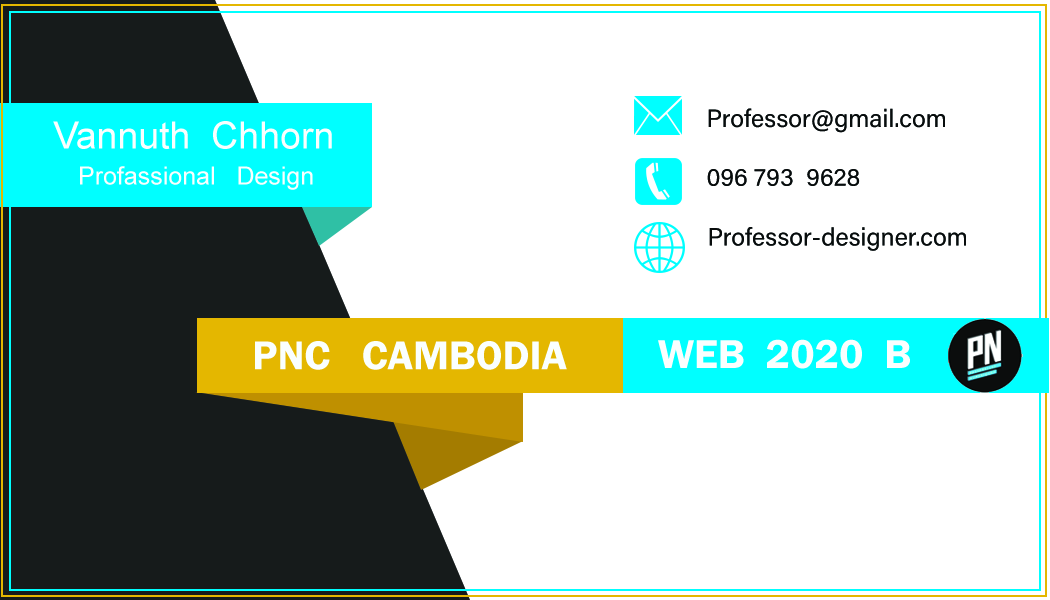
<style>
.page{position:relative;width:1050px;height:600px;background:#ffffff}
.page>*{position:absolute;margin:0}
.t1{font:25px "AcuminConcept-Regular";color:#080c0d}
.t2{font:37.5px "ArialMT";color:#fafffe}
.t3{font:25px "ArialMT";color:#fafffe}
.t4{font:41.7px "FranklinGothic-Demi";color:#fafffe}
</style>
<div class="page">
<p class="t1" style="left:708px;top:108px;width:237px;height:25px">Professor@gmail.com</p>
<p class="t2" style="left:53px;top:121px;width:279px;height:28px">Vannuth  Chhorn</p>
<p class="t3" style="left:80px;top:166px;width:233px;height:24px">Profassional   Design</p>
<p class="t1" style="left:707px;top:169px;width:153px;height:17px">096 793  9628</p>
<p class="t1" style="left:709px;top:227px;width:257px;height:24px">Professor-designer.com</p>
<p class="t4" style="left:255px;top:341px;width:312px;height:29px">PNC   CAMBODIA</p>
<p class="t4" style="left:658px;top:339px;width:252px;height:30px">WEB  2020  B</p>
</div>
